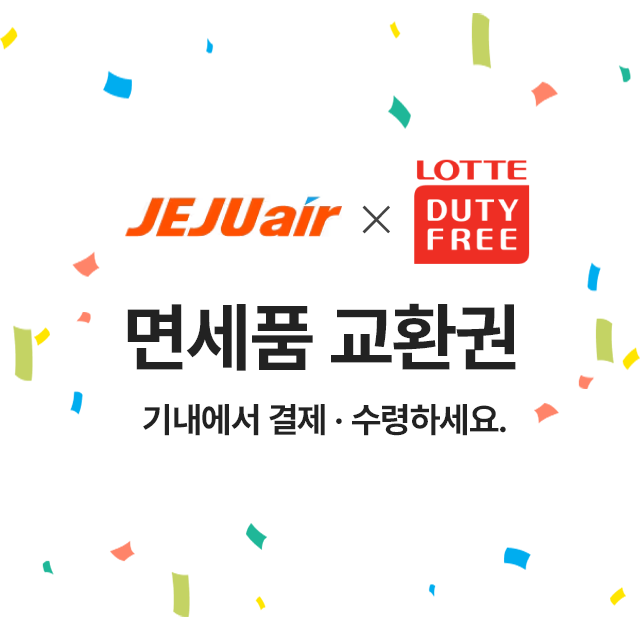
<style>
.page{position:relative;width:640px;height:640px;background:#ffffff}
.page>*{position:absolute;margin:0}
.t1{font:75px "Pretendard-Bold";letter-spacing:-0.02em;color:#222222}
.t2{font:35px "Pretendard-Bold";letter-spacing:-0.02em;color:#222222}
</style>
<div class="page">
<p class="t1" style="left:127px;top:303px;width:389px;height:68px">면세품 교환권</p>
<p class="t2" style="left:143px;top:404px;width:363px;height:32px">기내에서 결제 · 수령하세요.</p>
</div>
